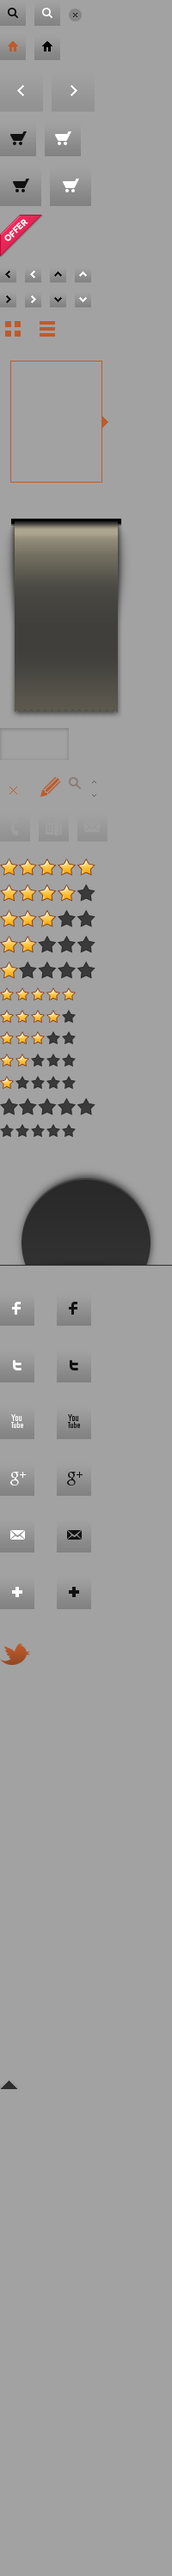
<style>
.page{position:relative;width:172px;height:2576px;background:#a2a2a2}
.page>*{position:absolute;margin:0}
.t1{font:8.6px "Novecentowide-DemiBold";color:#ffffff}
</style>
<div class="page">
<p class="t1" style="left:4px;top:219px;width:24px;height:22px;rotate:-45deg">offer</p>
</div>
